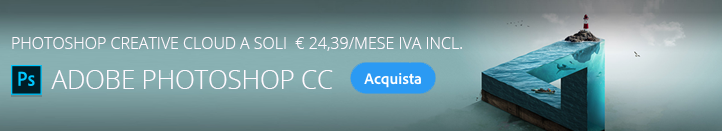
<style>
.page{position:relative;width:722px;height:131px}
.page>*{position:absolute;margin:0}
.t1{font:16px "OpenSans-Light";color:#fff9ff;text-transform:uppercase}
.t2{font:25.6px "OpenSans-Light";color:#fff9ff;text-transform:uppercase}
</style>
<div class="page">
<p class="t1" style="left:12px;top:37px;width:450px;height:14px">Photoshop Creative Cloud a soli  € 24,39/mese IVA incl.</p>
<p class="t2" style="left:51px;top:70px;width:282px;height:19px">Adobe Photoshop CC</p>
</div>
